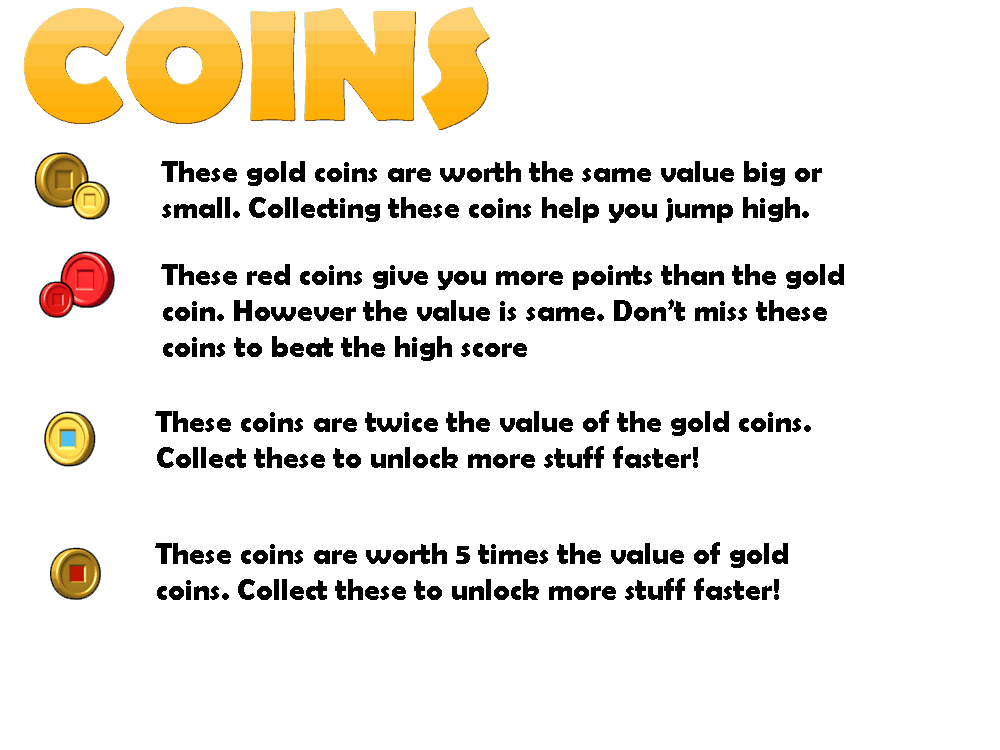
<style>
.page{position:relative;width:1000px;height:750px;background:#ffffff}
.page>*{position:absolute;margin:0}
.t1{font:30px "BerlinSansFBDemi-Bold";color:#000000}
</style>
<div class="page">
<p class="t1" style="left:161px;top:161px;width:661px;height:62px">These gold coins are worth the same value big or small. Collecting these coins help you jump high.</p>
<p class="t1" style="left:161px;top:264px;width:683px;height:97px">These red coins give you more points than the gold coin. However the value is same. Don’t miss these coins to beat the high score</p>
<p class="t1" style="left:155px;top:410px;width:656px;height:58px">These coins are twice the value of the gold coins. Collect these to unlock more stuff faster!</p>
<p class="t1" style="left:155px;top:542px;width:633px;height:58px">These coins are worth 5 times the value of gold coins. Collect these to unlock more stuff faster!</p>
</div>
